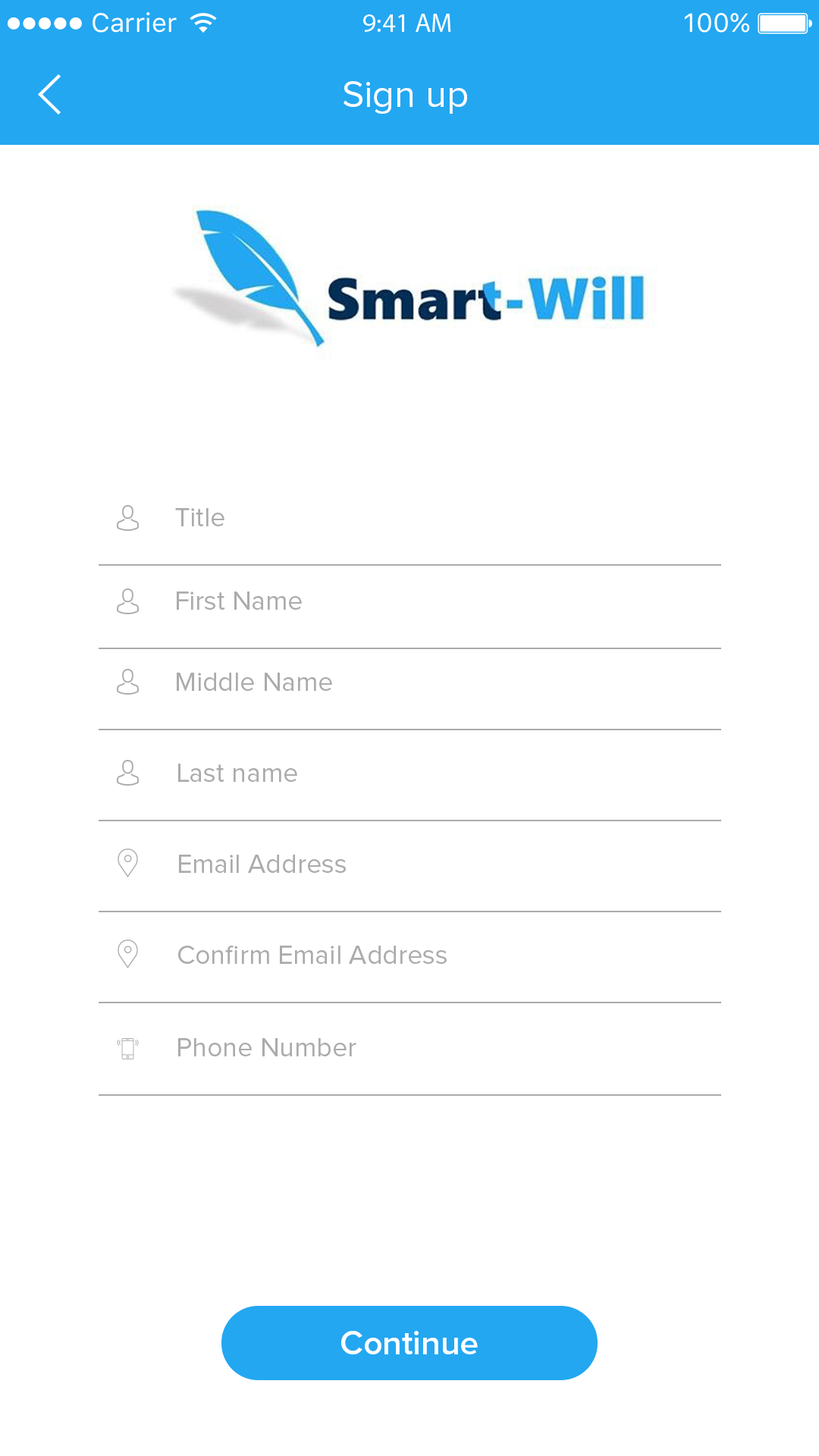
<style>
.page{position:relative;width:819px;height:1456px;background:#ffffff}
.page>*{position:absolute;margin:0}
.t1{font:38.1px "ProximaNova-Regular";color:#ffffff}
.t2{font:27.3px "ProximaNova-Regular";color:#ababad}
.t3{font:34.1px "ProximaNova-Semibold";color:#ffffff}
</style>
<div class="page">
<p class="t1" style="left:344px;top:81px;width:123px;height:33px">Sign up</p>
<p class="t2" style="left:175px;top:508px;width:49px;height:18px">Title</p>
<p class="t2" style="left:177px;top:591px;width:125px;height:19px">First Name</p>
<p class="t2" style="left:177px;top:673px;width:155px;height:18px">Middle Name</p>
<p class="t2" style="left:178px;top:764px;width:119px;height:18px">Last name</p>
<p class="t2" style="left:179px;top:855px;width:167px;height:18px">Email Address</p>
<p class="t2" style="left:178px;top:946px;width:269px;height:18px">Confirm Email Address</p>
<p class="t2" style="left:178px;top:1038px;width:178px;height:18px">Phone Number</p>
<p class="t3" style="left:341px;top:1331px;width:137px;height:23px">Continue</p>
</div>
